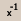
<style>
.page{position:relative;width:21px;height:21px;background:#d9cdc1}
.page>*{position:absolute;margin:0}
.t1{font:9px "Tahoma";color:#000000}
</style>
<div class="page">
<p class="t1" style="left:10px;top:3px;width:8px;height:7px">-1</p>
<p class="t1" style="left:7px;top:11px;width:5px;height:5px">x</p>
</div>
